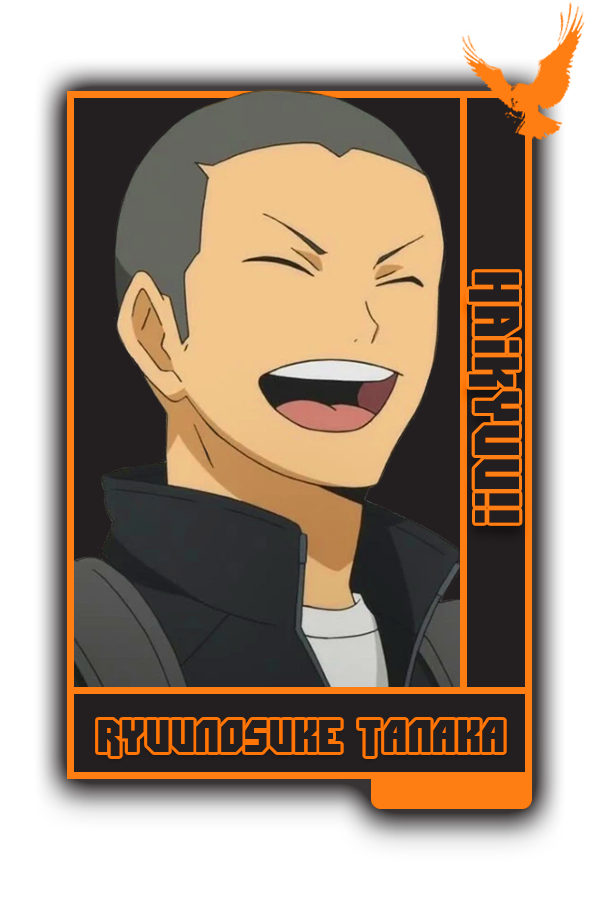
<style>
.page{position:relative;width:600px;height:900px;background:#ffffff}
.page>*{position:absolute;margin:0}
.t1{font:62.9px "Dimitri";color:#231f20}
.t2{font:45.6px "Dimitri";color:#231f20}
</style>
<div class="page">
<p class="t1" style="left:469px;top:272px;width:51px;height:251px;rotate:90deg">Haikyuu!!</p>
<p class="t2" style="left:98px;top:720px;width:406px;height:36px">RYUUNOSUKE TANAKA</p>
</div>
